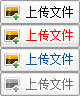
<style>
.page{position:relative;width:80px;height:96px;background:#ffffff}
.page>*{position:absolute;margin:0}
.t1{font:12px "SimSun";color:#000000}
.t2{font:12px "SimSun";color:#ff0000}
.t3{font:12px "SimSun";color:#0054a6}
.t4{font:12px "SimSun";color:#707070}
</style>
<div class="page">
<p class="t1" style="left:26px;top:6px;width:47px;height:12px">上传文件</p>
<p class="t2" style="left:26px;top:29px;width:47px;height:12px">上传文件</p>
<p class="t3" style="left:26px;top:53px;width:47px;height:12px">上传文件</p>
<p class="t4" style="left:26px;top:78px;width:47px;height:12px">上传文件</p>
</div>
